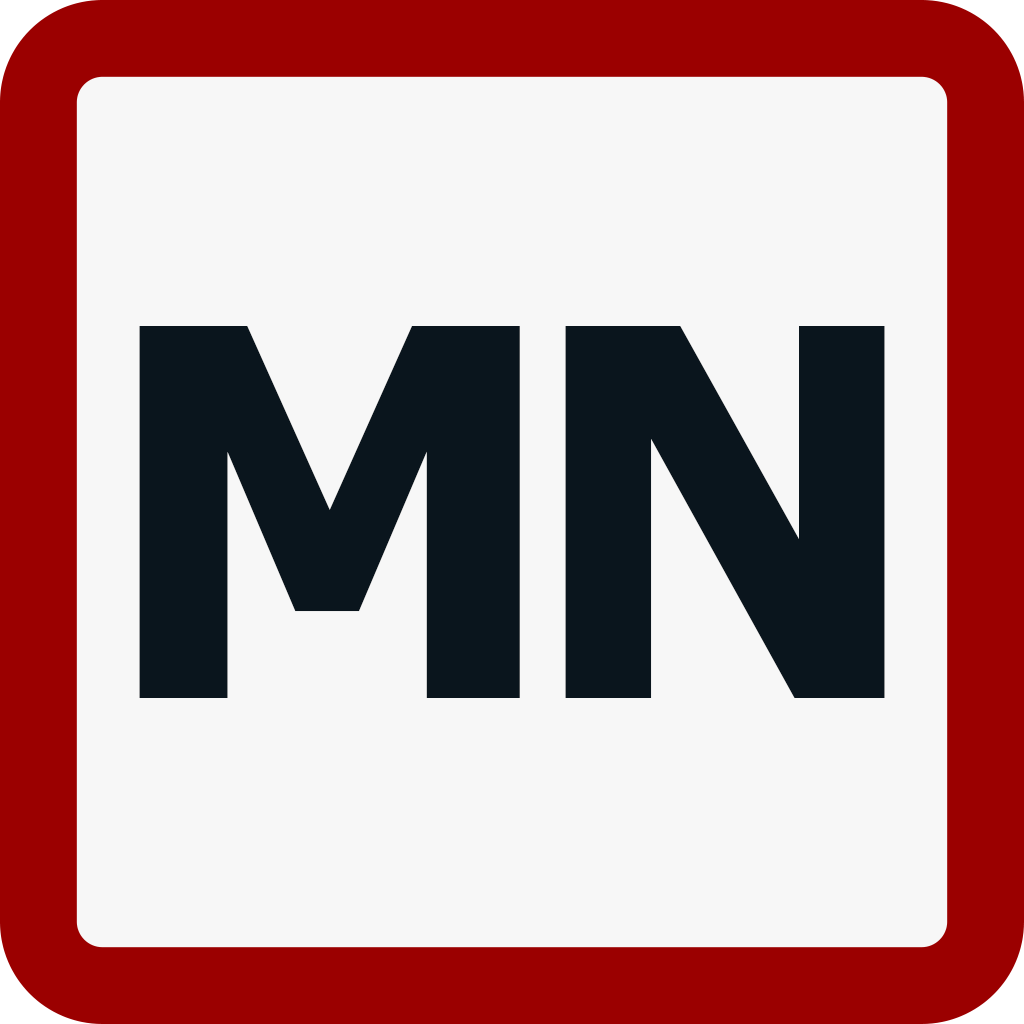
<style>
.page{position:relative;width:1024px;height:1024px;background:#f7f7f7}
.page>*{position:absolute;margin:0}
.t1{font:512px "Tahoma-Bold";letter-spacing:-0.06em;color:#0a151d}
</style>
<div class="page">
<p class="t1" style="left:139px;top:326px;width:746px;height:372px">MN</p>
</div>
